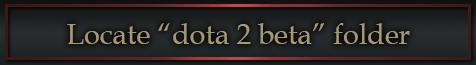
<style>
.page{position:relative;width:476px;height:65px}
.page>*{position:absolute;margin:0}
.t1{font:17.3px "BookAntiqua";color:#a59974}
</style>
<div class="page">
<p class="t1" style="left:67px;top:23px;width:343px;height:21px">Locate “dota 2 beta” folder</p>
</div>
